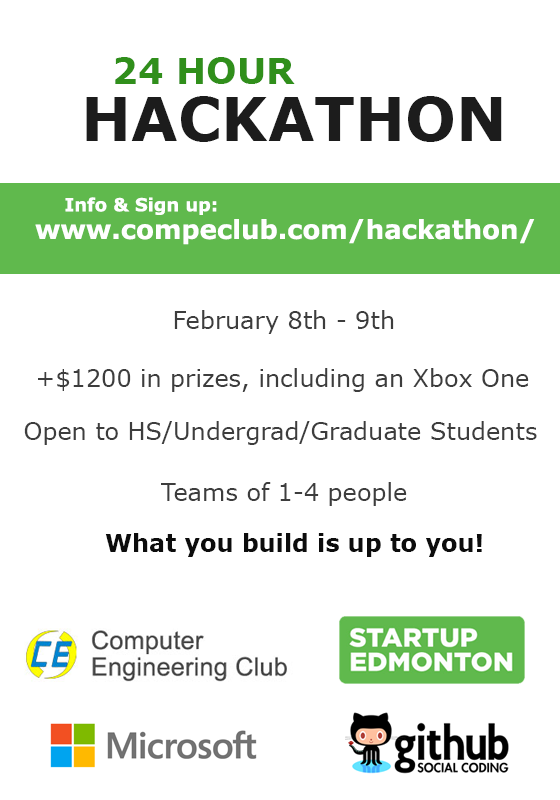
<style>
.page{position:relative;width:560px;height:800px;background:#ffffff}
.page>*{position:absolute;margin:0}
.t1{font:36px "Verdana-Bold";color:#308f1b}
.t2{font:60px "Verdana-Bold";color:#1c1c1c}
.t3{font:18px "Verdana-Bold";color:#ffffff}
.t4{font:26px "Verdana-Bold";color:#ffffff}
.t5{font:24px "Verdana";color:#3d3d3d}
.t6{font:24px "Verdana-Bold";color:#0c0c0c}
</style>
<div class="page">
<p class="t1" style="left:115px;top:57px;width:180px;height:27px">24 HOUR</p>
<p class="t2" style="left:86px;top:96px;width:416px;height:46px">HACKATHON</p>
<p class="t3" style="left:65px;top:197px;width:152px;height:18px">Info &amp; Sign up:</p>
<p class="t4" style="left:35px;top:219px;width:500px;height:26px">www.compeclub.com/hackathon/</p>
<p class="t5" style="left:174px;top:310px;width:220px;height:24px">February 8th - 9th</p>
<p class="t5" style="left:38px;top:368px;width:491px;height:24px">+$1200 in prizes, including an Xbox One</p>
<p class="t5" style="left:24px;top:421px;width:513px;height:24px">Open to HS/Undergrad/Graduate Students</p>
<p class="t5" style="left:161px;top:482px;width:246px;height:24px">Teams of 1-4 people</p>
<p class="t6" style="left:105px;top:533px;width:377px;height:24px">What you build is up to you!</p>
</div>
